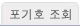
<style>
.page{position:relative;width:80px;height:26px;background:#eeeeee}
.page>*{position:absolute;margin:0}
.t1{font:12px "H2gtrM";color:#626266}
</style>
<div class="page">
<p class="t1" style="left:10px;top:9px;width:61px;height:11px">포기호 조회</p>
</div>
